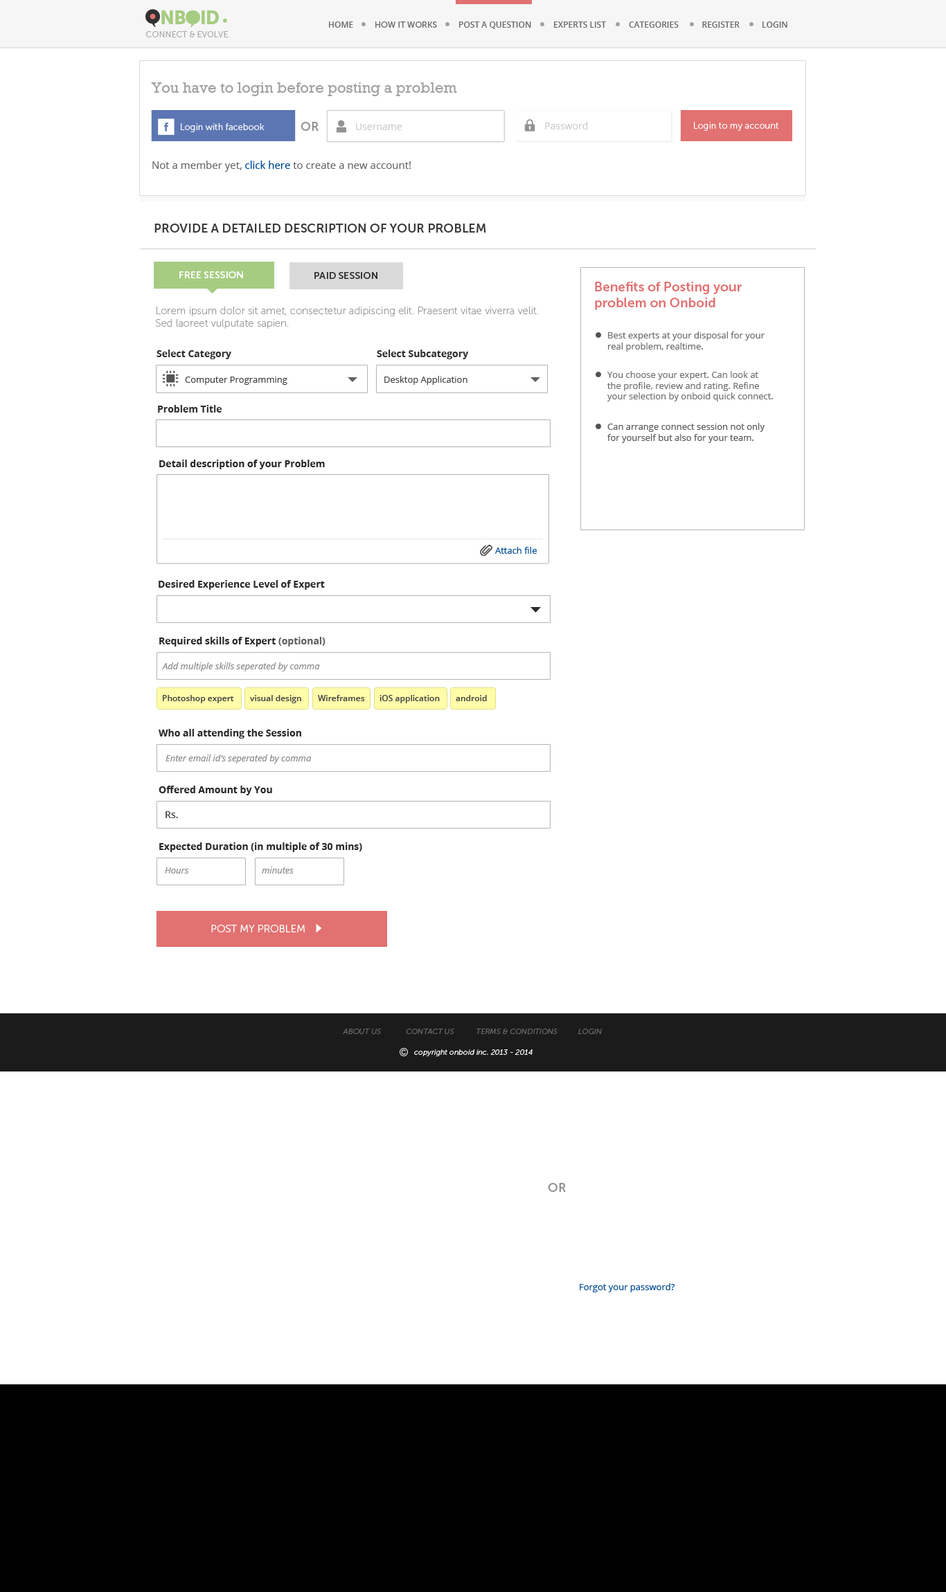
<style>
.page{position:relative;width:946px;height:1592px;background:#ffffff}
.page>*{position:absolute;margin:0}
.t1{font:18.7px "MuseoSans-900";letter-spacing:-0.04em;color:#a6cc81;text-transform:uppercase}
.t2{font:8.3px "OpenSans-Semibold";color:#6a6a6a;text-transform:uppercase}
.t3{font:8.3px "MuseoSans-500";color:#6a6a6a;text-transform:uppercase}
.t4{font:8.3px "MuseoSans-300";color:#a8a8a7;text-transform:uppercase}
.t5{font:15.2px "Rockwell";color:#a1a1a1}
.t6{font:9px "MuseoSans-300";color:#ffffff}
.t7{font:12.5px "MuseoSans-700";color:#939393;text-transform:uppercase}
.t8{font:9.7px "OpenSans";color:#cccccc}
.t9{font:10.4px "OpenSans";color:#6c6c6c}
.t10{font:10.4px "OpenSans";color:#004b91}
.t11{font:12.5px "MuseoSans-700";color:#3c3c3c;text-transform:uppercase}
.t12{font:9.7px "MuseoSans-700";color:#ffffff;text-transform:uppercase}
.t13{font:9.7px "MuseoSans-700";color:#303030;text-transform:uppercase}
.t14{font:13.2px "MuseoSans-700";color:#e27171}
.t15{font:10.4px "MuseoSans-100";color:#9c9c9c}
.t16{font:9px "OpenSans";color:#6d6d6d}
.t17{font:9.7px "OpenSans-Bold";color:#303030}
.t18{font:9px "OpenSans";color:#454545}
.t19{font:9px "OpenSans";color:#707070}
.t20{font:9px "OpenSans";color:#5a5a5a}
.t21{font:9.7px "OpenSans-Bold";color:#292929}
.t22{font:9px "OpenSans";color:#004b91}
.t23{font:9.7px "OpenSans-Bold";color:#5e5d5d}
.t24{font:9px "OpenSans-Italic";color:#8a8a8a}
.t25{font:8.3px "OpenSans-Semibold";color:#404040}
.t26{font:9.7px "OpenSans-Semibold";color:#4a4a4a}
.t27{font:10.4px "MuseoSans-300";color:#ffffff;text-transform:uppercase}
.t28{font:7.6px "MuseoSans-300Italic";color:#6a6a6a;text-transform:uppercase}
.t29{font:7.6px "MuseoSans-300Italic";color:#ffffff}
</style>
<div class="page">
<p class="t1" style="left:161px;top:10px;width:58px;height:14px">nboid</p>
<p class="t2" style="left:329px;top:21px;width:24px;height:7px">home</p>
<p class="t3" style="left:375px;top:21px;width:62px;height:7px">how it works</p>
<p class="t2" style="left:459px;top:21px;width:72px;height:8px">Post a Question</p>
<p class="t2" style="left:554px;top:21px;width:52px;height:7px">experts list</p>
<p class="t2" style="left:629px;top:21px;width:49px;height:7px">categories</p>
<p class="t2" style="left:702px;top:21px;width:37px;height:7px">register</p>
<p class="t2" style="left:762px;top:21px;width:25px;height:7px">login</p>
<p class="t4" style="left:146px;top:31px;width:82px;height:6px">Connect &amp; evolve</p>
<p class="t5" style="left:151px;top:82px;width:306px;height:14px">You have to login before posting a problem</p>
<p class="t6" style="left:181px;top:123px;width:83px;height:9px">Login with facebook</p>
<p class="t7" style="left:300px;top:122px;width:18px;height:9px">or</p>
<p class="t8" style="left:356px;top:123px;width:46px;height:7px">Username</p>
<p class="t8" style="left:545px;top:122px;width:43px;height:7px">Password</p>
<p class="t6" style="left:694px;top:122px;width:84px;height:9px">Login to my account</p>
<p class="t9" style="left:152px;top:161px;width:259px;height:11px">Not a member yet, <span class="t10">click here</span> to create a new account!</p>
<p class="t11" style="left:154px;top:224px;width:332px;height:9px">Provide a detailed description of your problem</p>
<p class="t12" style="left:179px;top:271px;width:64px;height:7px">FREE SESSION</p>
<p class="t13" style="left:314px;top:272px;width:63px;height:7px">PAID SESSION</p>
<p class="t14" style="left:595px;top:282px;width:146px;height:28px">Benefits of Posting your <br>problem on Onboid</p>
<p class="t15" style="left:156px;top:307px;width:382px;height:22px">Lorem ipsum dolor sit amet, consectetur adipiscing elit. Praesent vitae viverra velit. Sed laoreet vulputate sapien.</p>
<p class="t16" style="left:608px;top:332px;width:156px;height:20px">Best experts at your disposal for your <br>real problem, realtime.</p>
<p class="t17" style="left:156px;top:350px;width:75px;height:9px">Select Category</p>
<p class="t17" style="left:377px;top:350px;width:92px;height:9px">Select Subcategory</p>
<p class="t18" style="left:185px;top:377px;width:102px;height:8px">Computer Programming</p>
<p class="t18" style="left:384px;top:376px;width:83px;height:9px">Desktop Application</p>
<p class="t19" style="left:607px;top:371px;width:166px;height:31px">You choose your expert. Can look at <br>the profile, review and rating. Refine <br>your selection by onboid quick connect.</p>
<p class="t17" style="left:158px;top:405px;width:64px;height:8px">Problem Title</p>
<p class="t20" style="left:607px;top:423px;width:157px;height:20px">Can arrange connect session not only<br>for yourself but also for your team.</p>
<p class="t21" style="left:159px;top:460px;width:166px;height:9px">Detail description of your Problem</p>
<p class="t22" style="left:495px;top:547px;width:42px;height:7px">Attach file</p>
<p class="t21" style="left:159px;top:580px;width:166px;height:10px">Desired Experience Level of Expert</p>
<p class="t21" style="left:159px;top:637px;width:166px;height:10px">Required skills of Expert <span class="t23">(optional)</span></p>
<p class="t24" style="left:162px;top:663px;width:158px;height:9px">Add multiple skills seperated by comma</p>
<p class="t25" style="left:163px;top:695px;width:71px;height:8px">Photoshop expert</p>
<p class="t25" style="left:250px;top:695px;width:51px;height:8px">visual design</p>
<p class="t25" style="left:318px;top:695px;width:47px;height:6px">Wireframes</p>
<p class="t25" style="left:379px;top:695px;width:61px;height:8px">iOS application</p>
<p class="t25" style="left:456px;top:695px;width:31px;height:6px">android</p>
<p class="t21" style="left:159px;top:729px;width:142px;height:10px">Who all attending the Session</p>
<p class="t24" style="left:165px;top:755px;width:147px;height:9px">Enter email id’s seperated by comma</p>
<p class="t21" style="left:159px;top:786px;width:113px;height:9px">Offered Amount by You</p>
<p class="t26" style="left:165px;top:811px;width:13px;height:7px">Rs.</p>
<p class="t21" style="left:159px;top:843px;width:203px;height:9px">Expected Duration (in multiple of 30 mins)</p>
<p class="t24" style="left:165px;top:867px;width:24px;height:7px">Hours</p>
<p class="t24" style="left:262px;top:867px;width:32px;height:7px">minutes</p>
<p class="t27" style="left:211px;top:925px;width:94px;height:8px">POST MY PROBLEM</p>
<p class="t28" style="left:343px;top:1029px;width:259px;height:5px">About us       COntact us     Terms &amp; conditions          Login</p>
<p class="t29" style="left:414px;top:1050px;width:118px;height:6px">copyright onboid inc. 2013 - 2014</p>
<p class="t7" style="left:548px;top:1183px;width:18px;height:9px">or</p>
<p class="t22" style="left:579px;top:1284px;width:96px;height:9px">Forgot your password?</p>
</div>
